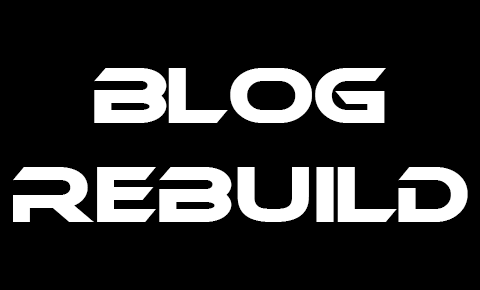
<style>
.page{position:relative;width:480px;height:290px;background:#000000}
.page>*{position:absolute;margin:0}
.t1{font:75px "Ethnocentric";color:#ffffff}
</style>
<div class="page">
<p class="t1" style="left:94px;top:68px;width:292px;height:55px">blog</p>
<p class="t1" style="left:13px;top:167px;width:455px;height:55px">rebuild</p>
</div>
